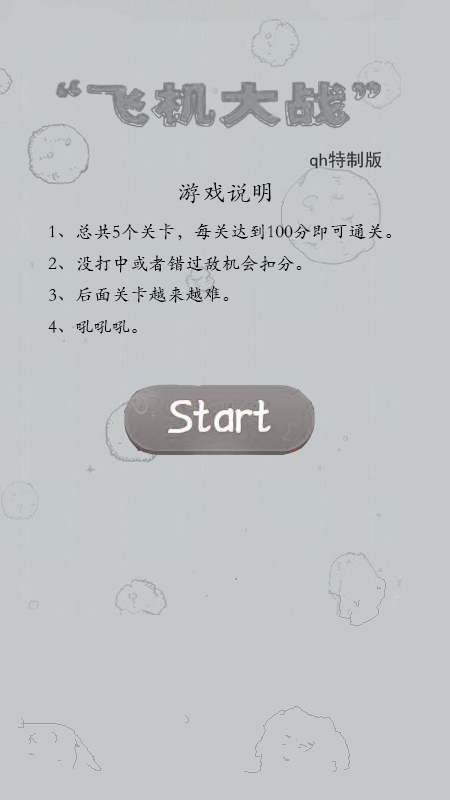
<style>
.page{position:relative;width:450px;height:800px;background:#c4c8c9}
.page>*{position:absolute;margin:0}
.t1{font:18px "SimHei";letter-spacing:0.015em;color:#313131}
.t2{font:18px "STKaiti";letter-spacing:0.015em;color:#000000}
.t3{font:24px "STKaiti";letter-spacing:0.015em;color:#000000}
</style>
<div class="page">
<p class="t1" style="left:310px;top:151px;width:72px;height:18px">qh特制版</p>
<p class="t2" style="left:48px;top:182px;width:343px;height:152px"><span class="t3">游戏说明<br></span>1、总共5个关卡，每关达到100分即可通关。<br>2、没打中或者错过敌机会扣分。<br>3、后面关卡越来越难。<br>4、吼吼吼。</p>
</div>
